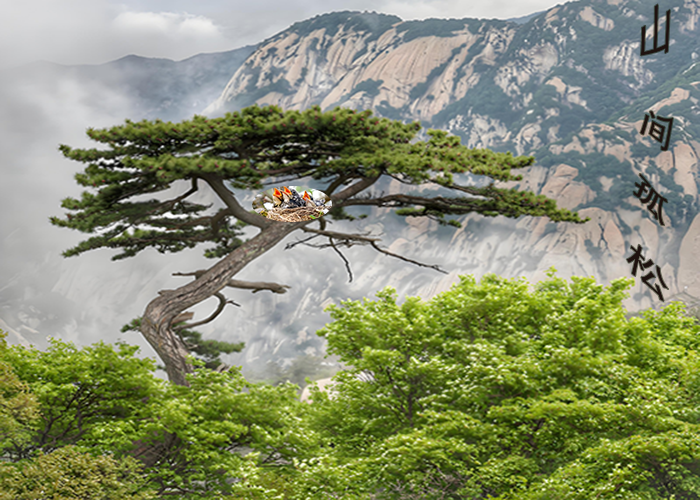
<style>
.page{position:relative;width:700px;height:500px}
.page>*{position:absolute;margin:0}
.t1{font:39px "SimHei";letter-spacing:0.002em;color:#1a120f;font-style:italic;scale:1.14 1}
</style>
<div class="page">
<p class="t1" style="left:626px;top:4px;width:47px;height:298px;text-align:center">山间孤松</p>
</div>
